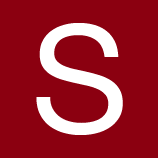
<style>
.page{position:relative;width:158px;height:158px;background:#8b0010}
.page>*{position:absolute;margin:0}
.t1{font:150px "HelveticaNeue";color:#ffffff}
</style>
<div class="page">
<p class="t1" style="left:36px;top:23px;width:87px;height:112px">S</p>
</div>
